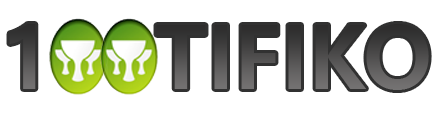
<style>
.page{position:relative;width:433px;height:114px;background:#ffffff}
.page>*{position:absolute;margin:0}
.t1{font:89px "MalgunGothicBold"}
</style>
<div class="page">
<p class="t1" style="left:9px;top:24px;width:420px;height:66px">100TIFIKO</p>
</div>
